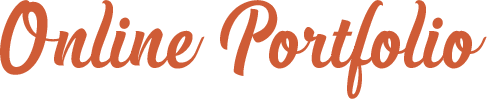
<style>
.page{position:relative;width:487px;height:99px;background:#ffffff}
.page>*{position:absolute;margin:0}
.t1{font:80px "Handycheera";color:#cf5c36}
</style>
<div class="page">
<p class="t1" style="left:0px;top:0px;width:487px;height:99px">Online Portfolio</p>
</div>
